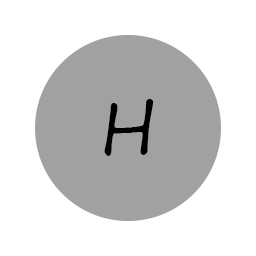
<style>
.page{position:relative;width:256px;height:256px;background:#ffffff}
.page>*{position:absolute;margin:0}
.t1{font:69.4px "SegoeScript";color:#000000}
</style>
<div class="page">
<p class="t1" style="left:104px;top:99px;width:50px;height:57px">H</p>
</div>
